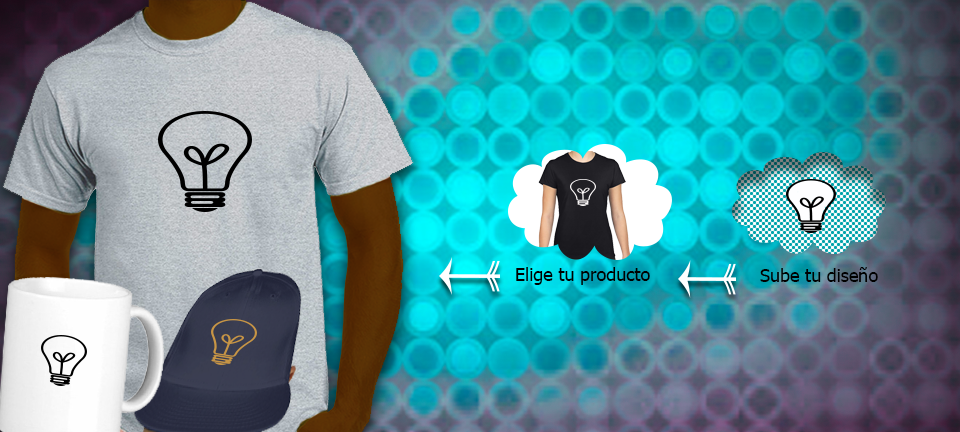
<style>
.page{position:relative;width:960px;height:432px}
.page>*{position:absolute;margin:0}
.t1{font:18px "Tahoma";color:#000000}
</style>
<div class="page">
<p class="t1" style="left:516px;top:267px;width:134px;height:18px">Elige tu producto</p>
<p class="t1" style="left:760px;top:267px;width:118px;height:15px">Sube tu diseño</p>
</div>
